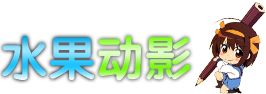
<style>
.page{position:relative;width:266px;height:94px;background:#ffffff}
.page>*{position:absolute;margin:0}
.t1{font:48px "FZY4K--GBK1-0"}
</style>
<div class="page">
<p class="t1" style="left:2px;top:35px;width:92px;height:45px">水果</p>
<p class="t1" style="left:98px;top:36px;width:93px;height:45px">动影</p>
</div>
